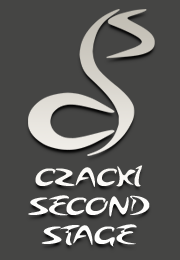
<style>
.page{position:relative;width:180px;height:260px;background:#454544}
.page>*{position:absolute;margin:0}
.t1{font:24px "Arabolical1";color:#ffffff;scale:1.2 1}
</style>
<div class="page">
<p class="t1" style="left:28px;top:165px;width:122px;height:82px;text-align:center">CZACKI<br>SECOND<br>STAGE</p>
</div>
